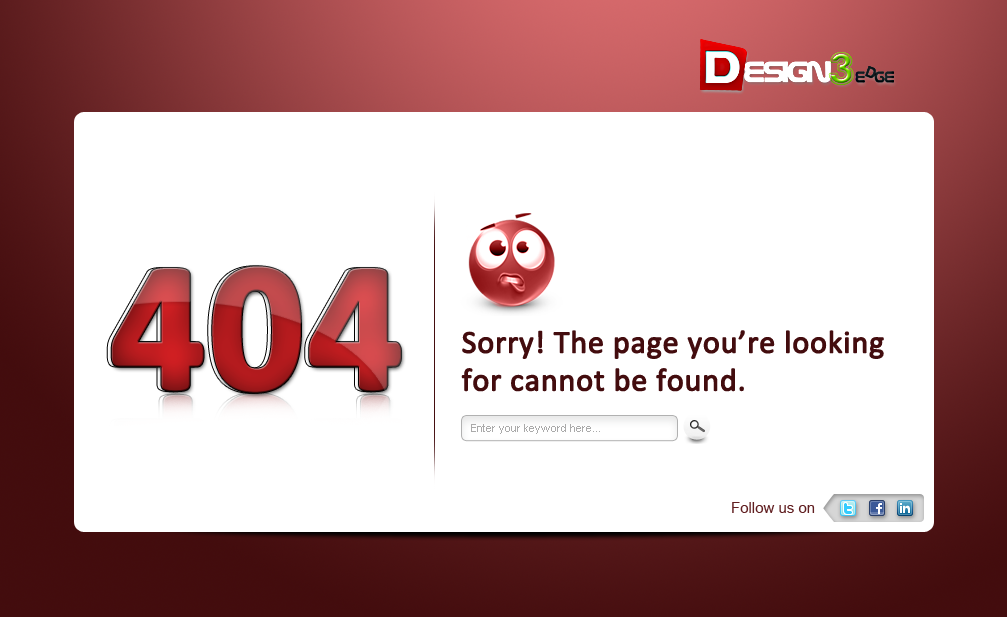
<style>
.page{position:relative;width:1007px;height:617px;background:#ffffff}
.page>*{position:absolute;margin:0}
.t1{font:185px "Calibri-Bold";font-weight:bold}
.t2{font:32px/30px "Calibri";color:#430c0e;font-weight:bold}
.t3{font:11px "ArialMT";color:#aaaaaa}
.t4{font:15px "ArialMT";color:#611f21}
</style>
<div class="page">
<p class="t1" style="left:107px;top:266px;width:290px;height:127px">404</p>
<p class="t1" style="left:111px;top:266px;width:290px;height:127px">404</p>
<p class="t2" style="left:461px;top:330px;width:423px;height:62px">Sorry! The page you’re looking <br>for cannot be found.</p>
<p class="t3" style="left:471px;top:424px;width:129px;height:10px">Enter your keyword here...</p>
<p class="t4" style="left:732px;top:502px;width:83px;height:11px">Follow us on</p>
</div>
